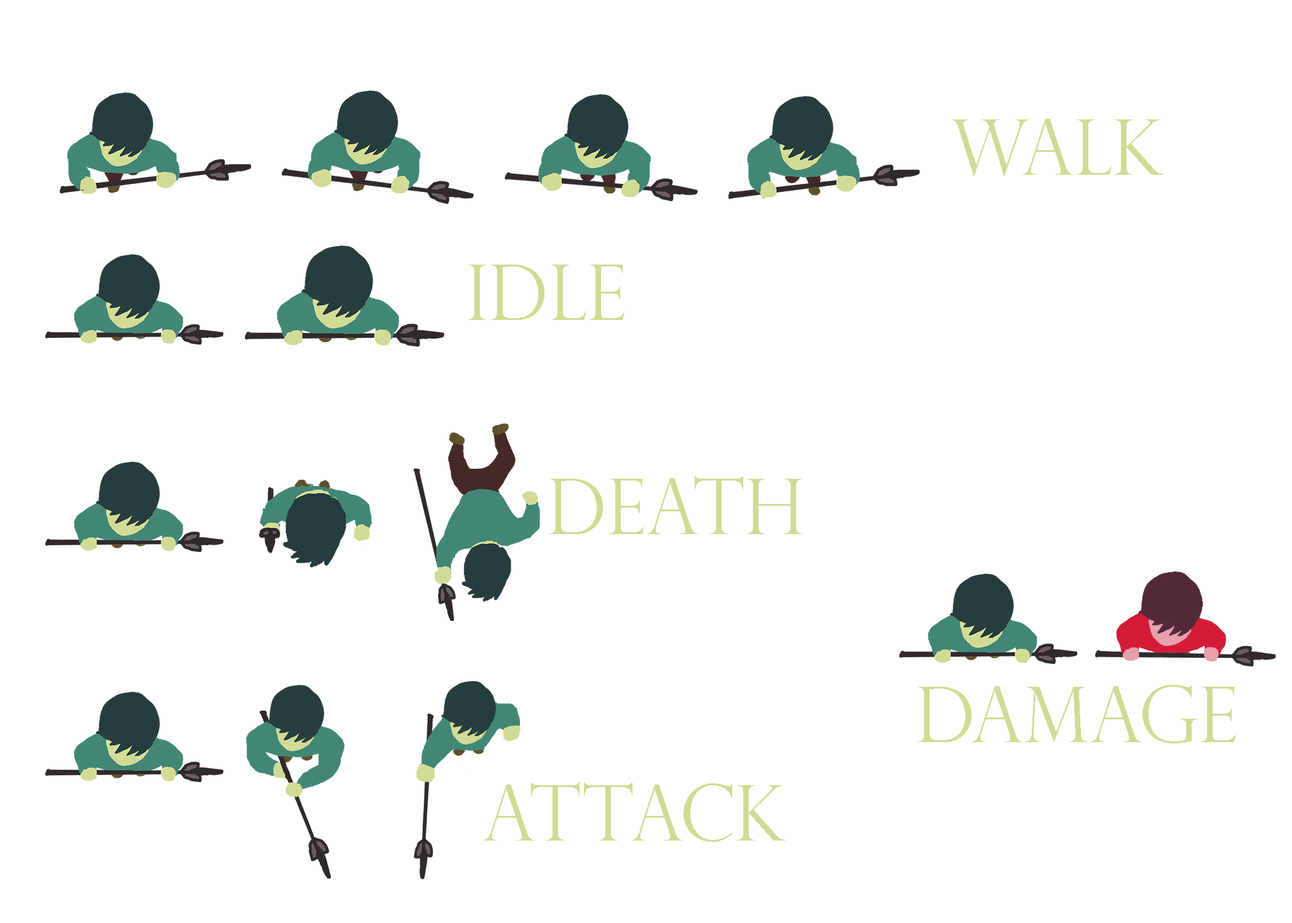
<style>
.page{position:relative;width:1292px;height:923px;background:#ffffff}
.page>*{position:absolute;margin:0}
.t1{font:76.9px "PerpetuaTitlingMT-Light";color:#d2db95}
</style>
<div class="page">
<p class="t1" style="left:951px;top:119px;width:212px;height:57px">walk</p>
<p class="t1" style="left:468px;top:265px;width:156px;height:55px">idle</p>
<p class="t1" style="left:549px;top:476px;width:253px;height:58px">death</p>
<p class="t1" style="left:918px;top:685px;width:318px;height:58px">damage</p>
<p class="t1" style="left:484px;top:783px;width:302px;height:59px">attack</p>
</div>
